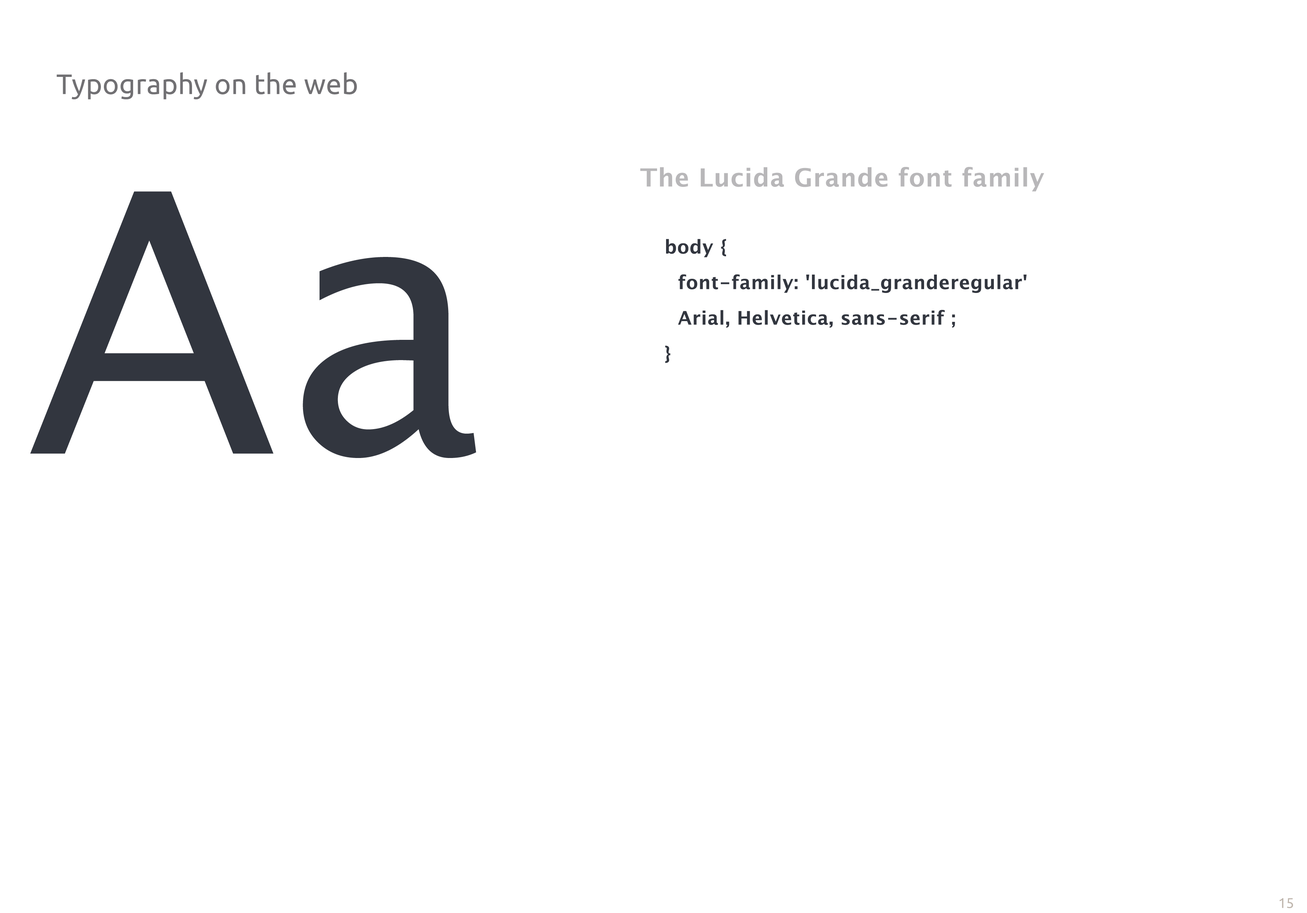
<style>
.page{position:relative;width:1307px;height:913px;background:#ffffff}
.page>*{position:absolute;margin:0}
.t1{font:25px "LucidaGrande-Bold";letter-spacing:0.02em;color:#b8b7b9}
.t2{font:362.4px "LucidaGrande";letter-spacing:0.02em;color:#32363f}
.t3{font:18.7px/35.5px "LucidaGrande-Bold";letter-spacing:0.02em;color:#32363f}
</style>
<div class="page">
<p class="t1" style="left:640px;top:167px;width:404px;height:25px">The Lucida Grande font family</p>
<p class="t2" style="left:30px;top:191px;width:446px;height:267px">Aa</p>
<p class="t3" style="left:665px;top:239px;width:362px;height:124px">body {<br> font-family: 'lucida_granderegular' <br> Arial, Helvetica, sans-serif ;<br>}</p>
</div>
